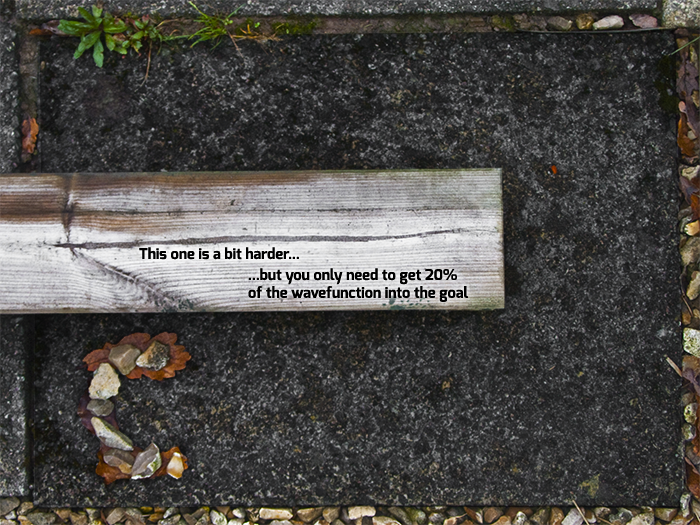
<style>
.page{position:relative;width:700px;height:525px}
.page>*{position:absolute;margin:0}
.t1{font:14.8px "Exo-Bold";color:#000000}
</style>
<div class="page">
<p class="t1" style="left:139px;top:247px;width:160px;height:13px">This one is a bit harder...</p>
<p class="t1" style="left:248px;top:268px;width:220px;height:34px">...but you only need to get 20% <br>of the wavefunction into the goal</p>
</div>
